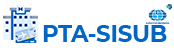
<style>
.page{position:relative;width:174px;height:51px;background:#ffffff}
.page>*{position:absolute;margin:0}
.t1{font:22.7px "Montserrat-Bold";letter-spacing:-0.01em;color:#0067c6}
</style>
<div class="page">
<p class="t1" style="left:43px;top:25px;width:124px;height:17px">PTA-SISUB</p>
</div>
